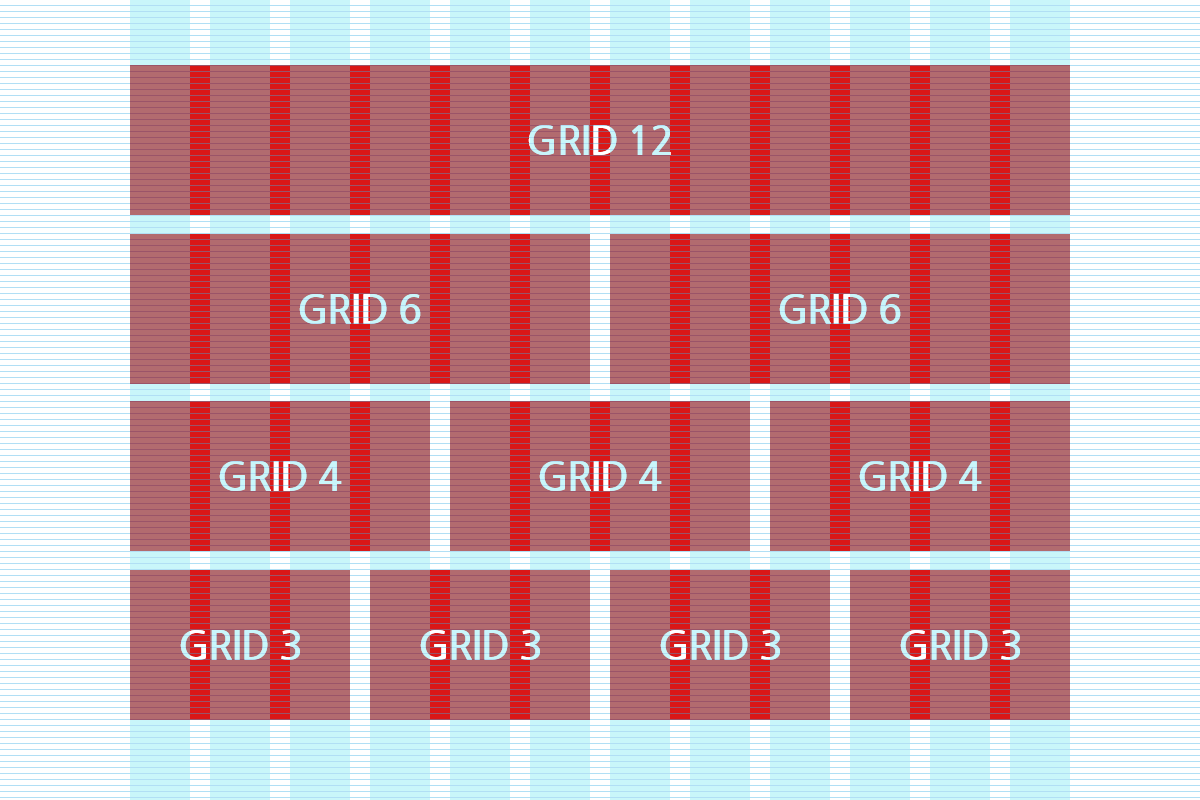
<style>
.page{position:relative;width:1200px;height:800px;background:#b26b6f}
.page>*{position:absolute;margin:0}
.t1{font:40px "NanumGothicBold";letter-spacing:-0.03em;color:#c9f6fa;text-transform:uppercase}
.t2{font:40px "NanumGothicBold";letter-spacing:-0.03em;text-transform:uppercase}
</style>
<div class="page">
<p class="t1" style="left:528px;top:125px;width:143px;height:30px">Grid 12</p>
<p class="t2" style="left:299px;top:294px;width:122px;height:30px">Grid 6</p>
<p class="t2" style="left:779px;top:294px;width:122px;height:30px">Grid 6</p>
<p class="t2" style="left:219px;top:461px;width:123px;height:30px">Grid 4</p>
<p class="t2" style="left:539px;top:461px;width:123px;height:30px">Grid 4</p>
<p class="t2" style="left:859px;top:461px;width:123px;height:30px">Grid 4</p>
<p class="t2" style="left:180px;top:630px;width:120px;height:30px">Grid 3</p>
<p class="t2" style="left:420px;top:630px;width:120px;height:30px">Grid 3</p>
<p class="t2" style="left:660px;top:630px;width:120px;height:30px">Grid 3</p>
<p class="t2" style="left:900px;top:630px;width:120px;height:30px">Grid 3</p>
</div>
